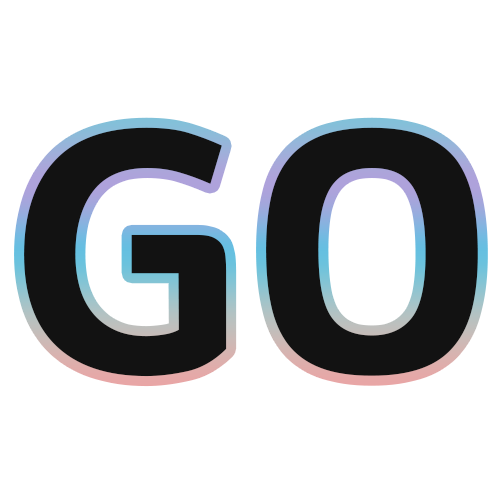
<style>
.page{position:relative;width:500px;height:500px;background:#ffffff}
.page>*{position:absolute;margin:0}
.t1{font:335px "GyeonggiTitleV";color:#121212}
</style>
<div class="page">
<p class="t1" style="left:24px;top:127px;width:454px;height:250px">GO</p>
</div>
